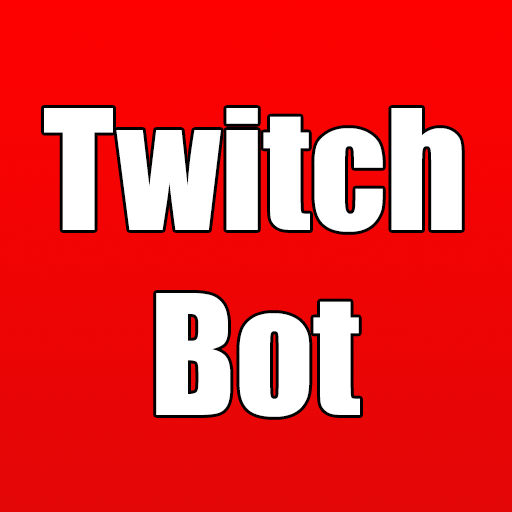
<style>
.page{position:relative;width:512px;height:512px}
.page>*{position:absolute;margin:0}
.t1{font:154.2px "Impact";color:#ffffff}
</style>
<div class="page">
<p class="t1" style="left:44px;top:108px;width:418px;height:309px;text-align:center">Twitch<br>Bot</p>
</div>
